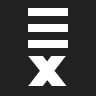
<style>
.page{position:relative;width:96px;height:96px;background:#212121}
.page>*{position:absolute;margin:0}
.t1{font:40.3px "GillSans-UltraBold";color:#ffffff}
</style>
<div class="page">
<p class="t1" style="left:28px;top:56px;width:39px;height:30px">X</p>
</div>
